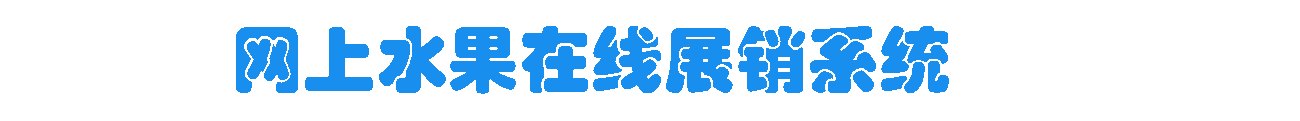
<style>
.page{position:relative;width:1300px;height:121px;background:#ffffff}
.page>*{position:absolute;margin:0}
.t1{font:72px "STHupo";color:#188eee}
</style>
<div class="page">
<p class="t1" style="left:236px;top:26px;width:713px;height:68px">网上水果在线展销系统</p>
</div>
